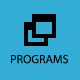
<style>
.page{position:relative;width:80px;height:80px;background:#33add6}
.page>*{position:absolute;margin:0}
.t1{font:12px "MyriadPro-Regular";color:#000000}
</style>
<div class="page">
<p class="t1" style="left:11px;top:54px;width:57px;height:10px">PROGRAMS</p>
</div>
